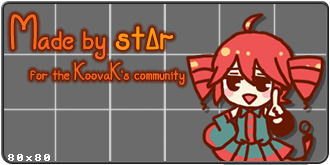
<style>
.page{position:relative;width:330px;height:165px;background:#6b6b6b}
.page>*{position:absolute;margin:0}
.t1{font:50px "Clausly";color:#f76820}
.t2{font:62.5px "Clausly";color:#ff9514}
.t3{font:25px "Clausly";color:#f76820}
.t4{font:12.5px "8bitOperatorPlus8-Bold";color:#ffffff}
</style>
<div class="page">
<p class="t1" style="left:10px;top:14px;width:164px;height:46px">Made by <span class="t2">stΔr</span></p>
<p class="t3" style="left:30px;top:62px;width:155px;height:23px">for the KoovaK’s community</p>
<p class="t4" style="left:8px;top:154px;width:42px;height:7px">80x80</p>
</div>
